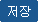
<style>
.page{position:relative;width:38px;height:22px;background:#1b5891}
.page>*{position:absolute;margin:0}
.t1{font:12px "Gulim";color:#ffffff}
</style>
<div class="page">
<p class="t1" style="left:8px;top:6px;width:23px;height:11px">저장</p>
</div>
